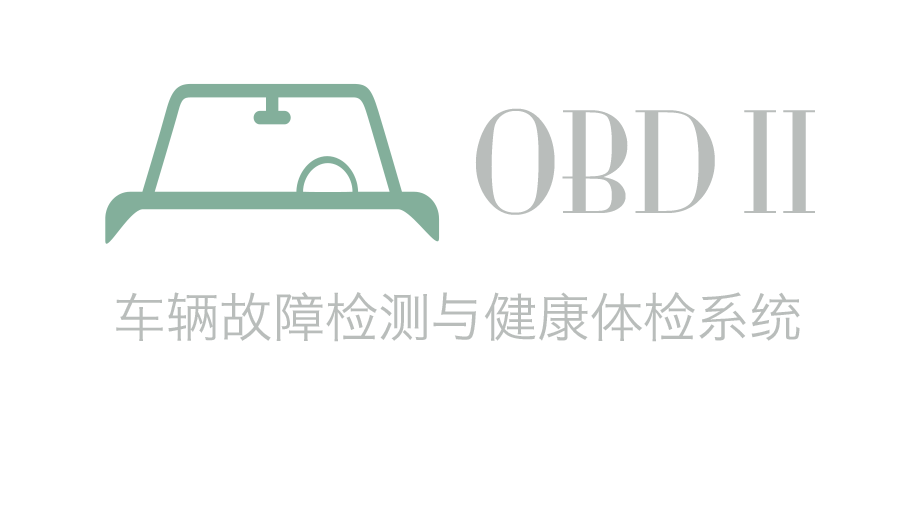
<style>
.page{position:relative;width:900px;height:514px;background:#ffffff}
.page>*{position:absolute;margin:0}
.t1{font:130px "MonaLisaSolidITCTT";color:#b9bdbb}
.t2{font:53px "HiraginoSansGB-W3";color:#b9bdbb}
</style>
<div class="page">
<p class="t1" style="left:475px;top:108px;width:340px;height:107px">OBD II</p>
<p class="t2" style="left:116px;top:292px;width:684px;height:50px">车辆故障检测与健康体检系统</p>
</div>
